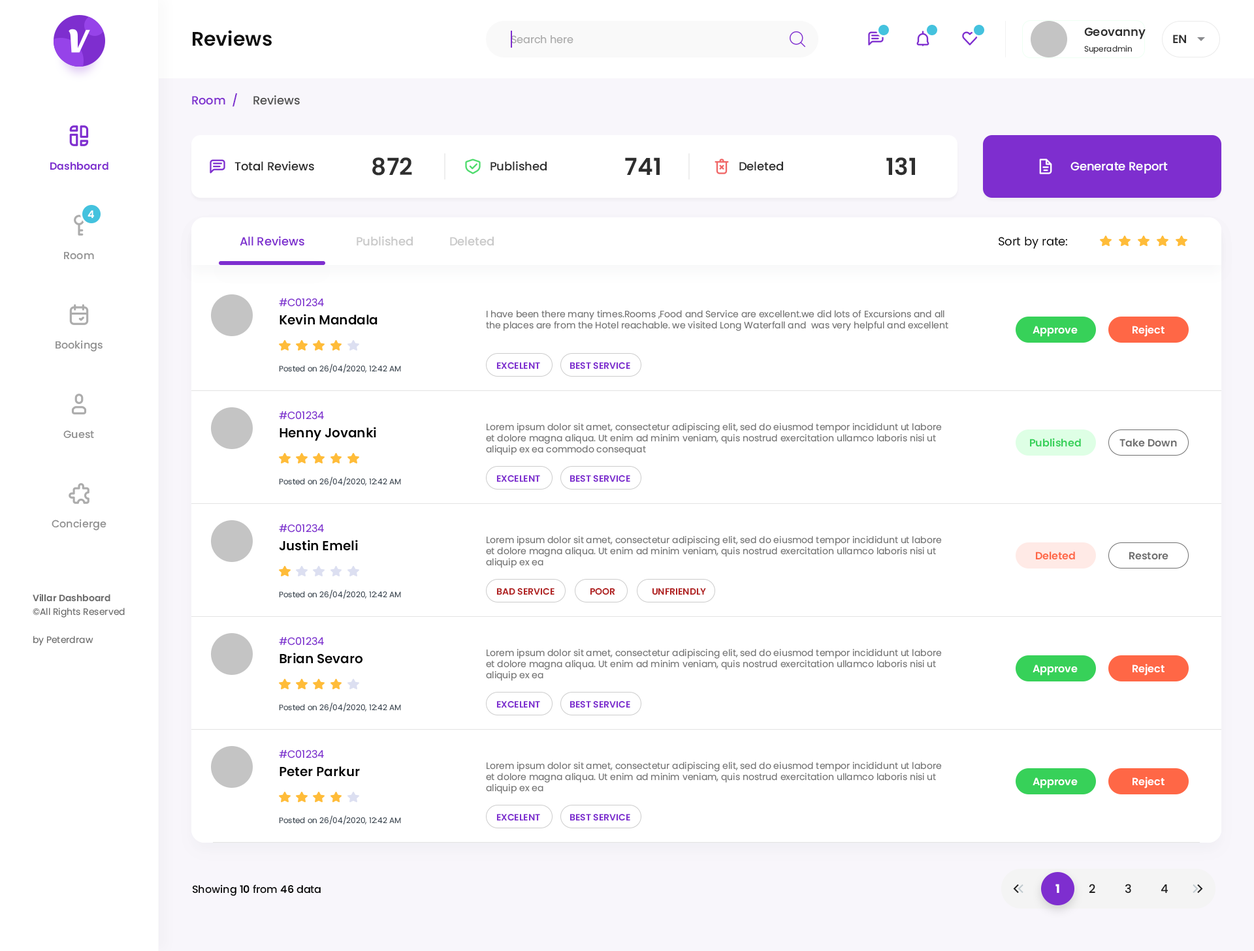
<style>
.page{position:relative;width:1254px;height:951px;background:#ffffff}
.page>*{position:absolute;margin:0}
.t1{font:11.8px "Poppins-SemiBold";color:#2e2e2e}
.t2{font:19.6px "Poppins-SemiBold";color:#0f0f0f}
.t3{font:10.4px "Poppins-Regular";color:#aaaaaa}
.t4{font:7.8px "Poppins-Regular";color:#2e2e2e}
.t5{font:11.8px "Poppins-Medium";color:#7e2ecf}
.t6{font:11.8px "Poppins-Medium";color:#525252}
.t7{font:10.4px "Poppins-SemiBold";color:#7e2ecf}
.t8{font:11.8px "Poppins-Medium";color:#2e2e2e}
.t9{font:23.5px "Poppins-SemiBold";color:#2e2e2e}
.t10{font:11.8px "Poppins-Medium";color:#ffffff}
.t11{font:10.4px "Poppins-SemiBold";color:#ffffff}
.t12{font:11.8px "Poppins-Medium";color:#cacaca}
.t13{font:11.8px "Poppins-Regular";color:#000000}
.t14{font:10.4px "Poppins-Medium";color:#8f8f8f}
.t15{font:10.4px "Poppins-Regular";color:#7e2ecf}
.t16{font:13.1px "Poppins-SemiBold";color:#000000}
.t17{font:9.1px "Poppins-Regular";color:#737373}
.t18{font:7.8px "Poppins-Regular";color:#3e4954}
.t19{font:9.1px "Poppins-SemiBold";color:#7e2ecf}
.t20{font:10.4px "Poppins-SemiBold";color:#37d15a}
.t21{font:10.4px "Poppins-SemiBold";color:#6f6f6f}
.t22{font:10.4px "Poppins-SemiBold";color:#ff6746}
.t23{font:10.4px "Poppins-SemiBold";color:#6e6e6e}
.t24{font:9.1px "Poppins-SemiBold";color:#b12222}
.t25{font:9.1px "Poppins-SemiBold";color:#6b6b6b}
.t26{font:9.1px "Poppins-Regular";color:#6b6b6b}
.t27{font:10.4px "Poppins-Medium";color:#000000}
.t28{font:10.4px "Poppins-SemiBold";color:#000000}
.t29{font:11.8px "Poppins-Bold";color:#ffffff}
.t30{font:11.8px "Poppins-Medium";color:#202020}
</style>
<div class="page">
<p class="t1" style="left:1084px;top:27px;width:61px;height:12px">Geovanny</p>
<p class="t2" style="left:193px;top:30px;width:79px;height:16px">Reviews</p>
<p class="t3" style="left:511px;top:35px;width:62px;height:9px">Search here</p>
<p class="t1" style="left:1173px;top:35px;width:13px;height:8px">EN</p>
<p class="t4" style="left:1084px;top:45px;width:47px;height:9px">Superadmin</p>
<p class="t5" style="left:192px;top:93px;width:45px;height:14px">Room  /</p>
<p class="t6" style="left:253px;top:95px;width:47px;height:10px">Reviews</p>
<p class="t7" style="left:50px;top:162px;width:58px;height:8px">Dashboard</p>
<p class="t8" style="left:234px;top:161px;width:80px;height:10px">Total Reviews</p>
<p class="t9" style="left:372px;top:157px;width:40px;height:19px">872</p>
<p class="t8" style="left:490px;top:161px;width:56px;height:10px">Published</p>
<p class="t9" style="left:625px;top:157px;width:34px;height:18px">741</p>
<p class="t8" style="left:739px;top:161px;width:44px;height:10px">Deleted</p>
<p class="t9" style="left:886px;top:157px;width:29px;height:19px">131</p>
<p class="t10" style="left:1070px;top:162px;width:97px;height:12px">Generate Report</p>
<p class="t11" style="left:87px;top:210px;width:7px;height:8px">4</p>
<p class="t5" style="left:240px;top:236px;width:64px;height:10px">All Reviews</p>
<p class="t12" style="left:356px;top:236px;width:57px;height:10px">Published</p>
<p class="t12" style="left:450px;top:236px;width:44px;height:10px">Deleted</p>
<p class="t13" style="left:998px;top:236px;width:69px;height:13px">Sort by rate:</p>
<p class="t14" style="left:64px;top:252px;width:30px;height:8px">Room</p>
<p class="t15" style="left:279px;top:298px;width:45px;height:9px">#C01234</p>
<p class="t16" style="left:279px;top:314px;width:98px;height:11px">Kevin Mandala</p>
<p class="t17" style="left:486px;top:310px;width:462px;height:21px">I have been there many times.Rooms ,Food and Service are excellent.we did lots of Excursions and all the places are from the Hotel reachable. we visited Long Waterfall and  was very helpful and excellent</p>
<p class="t11" style="left:1032px;top:326px;width:45px;height:11px">Approve</p>
<p class="t11" style="left:1132px;top:325px;width:32px;height:12px">Reject</p>
<p class="t14" style="left:55px;top:340px;width:48px;height:12px">Bookings</p>
<p class="t18" style="left:279px;top:364px;width:122px;height:9px">Posted on 26/04/2020, 12:42 AM</p>
<p class="t19" style="left:496px;top:362px;width:44px;height:8px">EXCELENT</p>
<p class="t19" style="left:569px;top:362px;width:61px;height:8px">BEST SERVICE</p>
<p class="t15" style="left:279px;top:411px;width:45px;height:9px">#C01234</p>
<p class="t17" style="left:486px;top:423px;width:455px;height:32px">Lorem ipsum dolor sit amet, consectetur adipiscing elit, sed do eiusmod tempor incididunt ut labore et dolore magna aliqua. Ut enim ad minim veniam, quis nostrud exercitation ullamco laboris nisi ut aliquip ex ea commodo consequat</p>
<p class="t14" style="left:63px;top:430px;width:31px;height:9px">Guest</p>
<p class="t16" style="left:279px;top:427px;width:97px;height:14px">Henny Jovanki</p>
<p class="t20" style="left:1030px;top:438px;width:51px;height:9px">Published</p>
<p class="t21" style="left:1119px;top:439px;width:57px;height:8px">Take Down</p>
<p class="t18" style="left:279px;top:477px;width:122px;height:9px">Posted on 26/04/2020, 12:42 AM</p>
<p class="t19" style="left:496px;top:475px;width:44px;height:7px">EXCELENT</p>
<p class="t19" style="left:569px;top:475px;width:61px;height:7px">BEST SERVICE</p>
<p class="t14" style="left:52px;top:519px;width:54px;height:12px">Concierge</p>
<p class="t15" style="left:279px;top:524px;width:45px;height:9px">#C01234</p>
<p class="t16" style="left:279px;top:540px;width:79px;height:11px">Justin Emeli</p>
<p class="t17" style="left:486px;top:536px;width:455px;height:32px">Lorem ipsum dolor sit amet, consectetur adipiscing elit, sed do eiusmod tempor incididunt ut labore et dolore magna aliqua. Ut enim ad minim veniam, quis nostrud exercitation ullamco laboris nisi ut aliquip ex ea</p>
<p class="t22" style="left:1035px;top:552px;width:40px;height:8px">Deleted</p>
<p class="t23" style="left:1129px;top:552px;width:39px;height:8px">Restore</p>
<p class="t18" style="left:279px;top:590px;width:122px;height:9px">Posted on 26/04/2020, 12:42 AM</p>
<p class="t24" style="left:496px;top:588px;width:58px;height:7px">BAD SERVICE</p>
<p class="t24" style="left:590px;top:588px;width:25px;height:7px">POOR</p>
<p class="t24" style="left:652px;top:588px;width:54px;height:7px">UNFRIENDLY</p>
<p class="t25" style="left:33px;top:594px;width:77px;height:8px">Villar Dashboard</p>
<p class="t26" style="left:33px;top:608px;width:92px;height:10px">©All Rights Reserved</p>
<p class="t26" style="left:33px;top:636px;width:60px;height:10px">by Peterdraw</p>
<p class="t15" style="left:279px;top:637px;width:45px;height:9px">#C01234</p>
<p class="t16" style="left:279px;top:653px;width:83px;height:11px">Brian Sevaro</p>
<p class="t17" style="left:486px;top:649px;width:455px;height:32px">Lorem ipsum dolor sit amet, consectetur adipiscing elit, sed do eiusmod tempor incididunt ut labore et dolore magna aliqua. Ut enim ad minim veniam, quis nostrud exercitation ullamco laboris nisi ut aliquip ex ea</p>
<p class="t11" style="left:1032px;top:665px;width:45px;height:11px">Approve</p>
<p class="t11" style="left:1132px;top:664px;width:32px;height:12px">Reject</p>
<p class="t19" style="left:496px;top:701px;width:44px;height:7px">EXCELENT</p>
<p class="t19" style="left:569px;top:701px;width:61px;height:7px">BEST SERVICE</p>
<p class="t18" style="left:279px;top:703px;width:122px;height:9px">Posted on 26/04/2020, 12:42 AM</p>
<p class="t15" style="left:279px;top:750px;width:45px;height:9px">#C01234</p>
<p class="t17" style="left:486px;top:762px;width:455px;height:32px">Lorem ipsum dolor sit amet, consectetur adipiscing elit, sed do eiusmod tempor incididunt ut labore et dolore magna aliqua. Ut enim ad minim veniam, quis nostrud exercitation ullamco laboris nisi ut aliquip ex ea</p>
<p class="t16" style="left:279px;top:766px;width:81px;height:11px">Peter Parkur</p>
<p class="t11" style="left:1032px;top:778px;width:45px;height:11px">Approve</p>
<p class="t11" style="left:1132px;top:777px;width:32px;height:12px">Reject</p>
<p class="t18" style="left:279px;top:815px;width:122px;height:10px">Posted on 26/04/2020, 12:42 AM</p>
<p class="t19" style="left:496px;top:814px;width:44px;height:7px">EXCELENT</p>
<p class="t19" style="left:569px;top:814px;width:61px;height:7px">BEST SERVICE</p>
<p class="t27" style="left:193px;top:885px;width:128px;height:11px">Showing <span class="t28">10 </span>from <span class="t28">46 </span>data</p>
<p class="t29" style="left:1055px;top:884px;width:4px;height:9px">1</p>
<p class="t30" style="left:1088px;top:884px;width:7px;height:9px">2</p>
<p class="t30" style="left:1124px;top:884px;width:7px;height:10px">3</p>
<p class="t30" style="left:1160px;top:884px;width:8px;height:10px">4</p>
</div>
